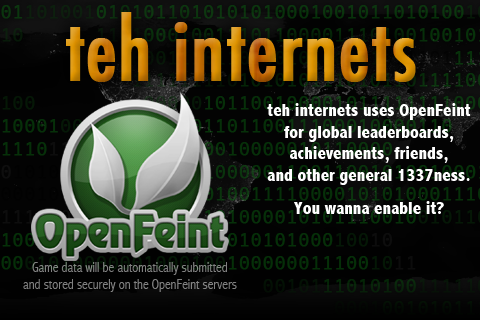
<style>
.page{position:relative;width:480px;height:320px}
.page>*{position:absolute;margin:0}
.t1{font:82px "Futura-CondensedMedium";font-weight:bold}
.t2{font:18px "AbadiMT-CondensedExtraBold";color:#ffffff}
.t3{font:18px/33px "AbadiMT-CondensedExtraBold";color:#ffffff}
.t4{font:14px "AbadiMT-CondensedLight";color:#808080}
</style>
<div class="page">
<p class="t1" style="left:66px;top:12px;width:350px;height:70px">teh internets</p>
<p class="t2" style="left:267px;top:103px;width:204px;height:111px;text-align:center">teh internets uses OpenFeint<br>for global leaderboards,<br>achievements, friends,<br>and other general 1337ness.<br><span class="t3">You wanna enable it?</span></p>
<p class="t4" style="left:23px;top:262px;width:214px;height:30px;text-align:center">Game data will be automatically submitted<br>and stored securely on the OpenFeint servers</p>
</div>
